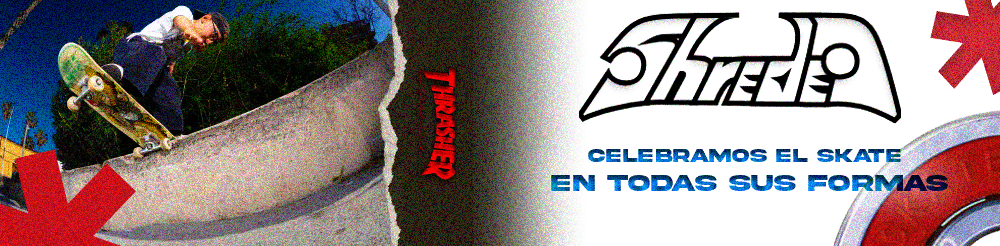
<style>
.page{position:relative;width:1000px;height:246px;background:#ffffff}
.page>*{position:absolute;margin:0}
.t1{font:18.7px "AkiraExpanded-SuperBold"}
.t2{font:24px "AkiraExpanded-SuperBold"}
</style>
<div class="page">
<p class="t1" style="left:551px;top:149px;width:397px;height:42px">Celebramos el skate<br><span class="t2">en todas sus formas</span></p>
</div>
